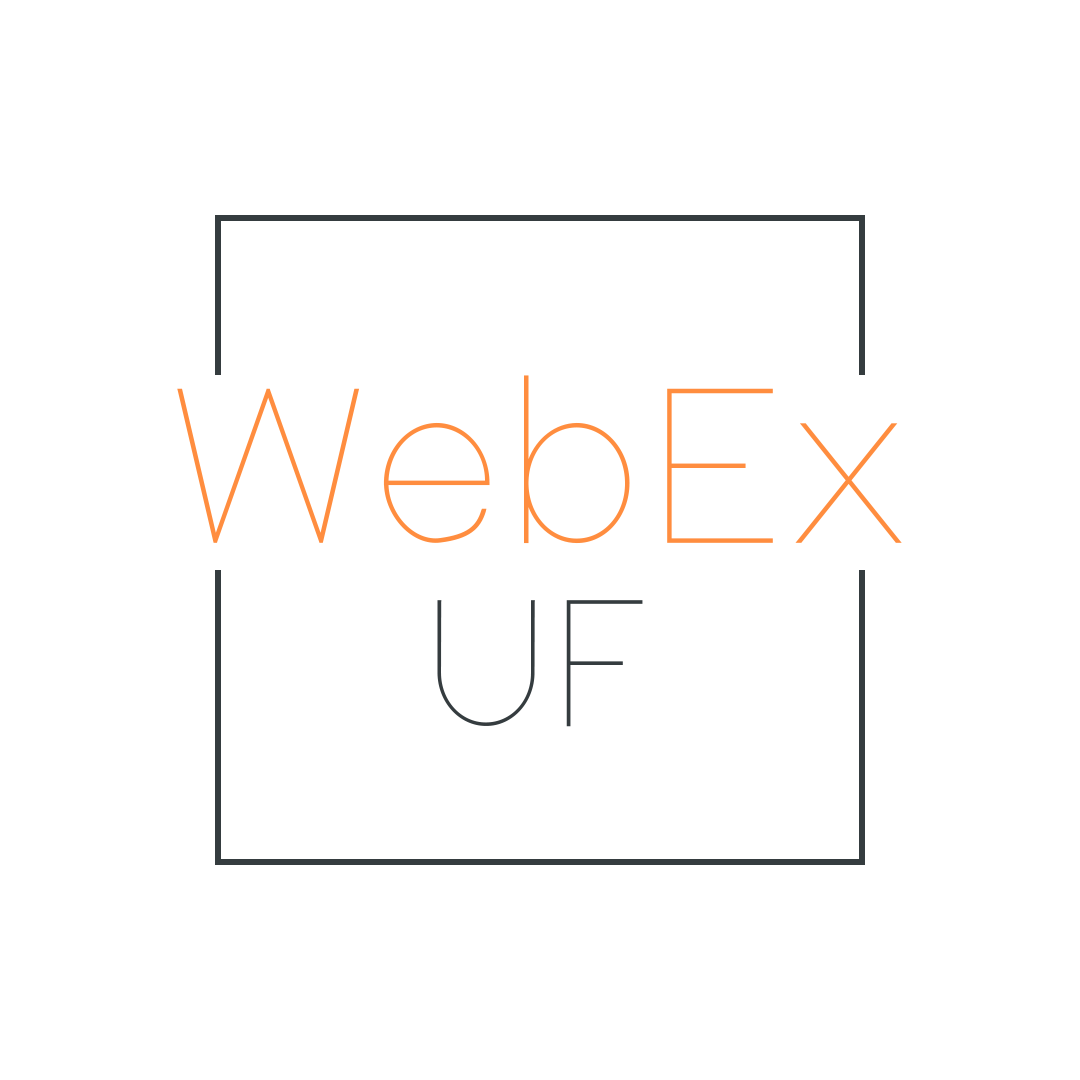
<style>
.page{position:relative;width:1080px;height:1080px;background:#ffffff}
.page>*{position:absolute;margin:0}
.t1{font:220px "NordicaHairline";color:#ff8d3f}
.t2{font:180px "NordicaHairline";color:#353c3f}
</style>
<div class="page">
<p class="t1" style="left:177px;top:375px;width:725px;height:169px">WebEx</p>
<p class="t2" style="left:437px;top:600px;width:206px;height:127px">UF</p>
</div>
